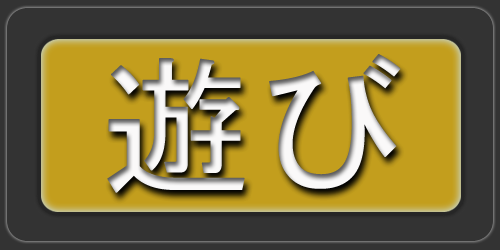
<style>
.page{position:relative;width:500px;height:250px;background:#333333}
.page>*{position:absolute;margin:0}
.t1{font:150px "MS-Gothic";font-weight:bold}
</style>
<div class="page">
<p class="t1" style="left:107px;top:54px;width:294px;height:139px">遊び</p>
</div>
